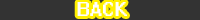
<style>
.page{position:relative;width:200px;height:20px;background:#333333}
.page>*{position:absolute;margin:0}
.t1{font:18px "System";color:#ffffff}
</style>
<div class="page">
<p class="t1" style="left:77px;top:2px;width:50px;height:14px">BACK</p>
</div>
